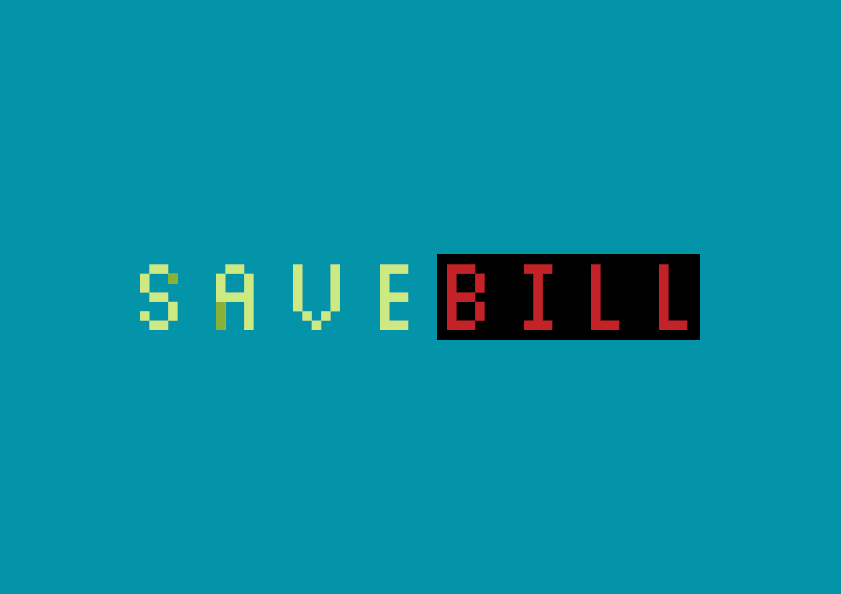
<style>
.page{position:relative;width:841px;height:594px;background:#0494aa}
.page>*{position:absolute;margin:0}
.t1{font:150px "Thintel";letter-spacing:0.2em;color:#cde982;text-transform:uppercase}
.t2{font:150px "Thintel";letter-spacing:0.2em;color:#c42229;text-transform:uppercase}
</style>
<div class="page">
<p class="t1" style="left:140px;top:264px;width:548px;height:66px">SAVE<span class="t2">BILL</span></p>
</div>
